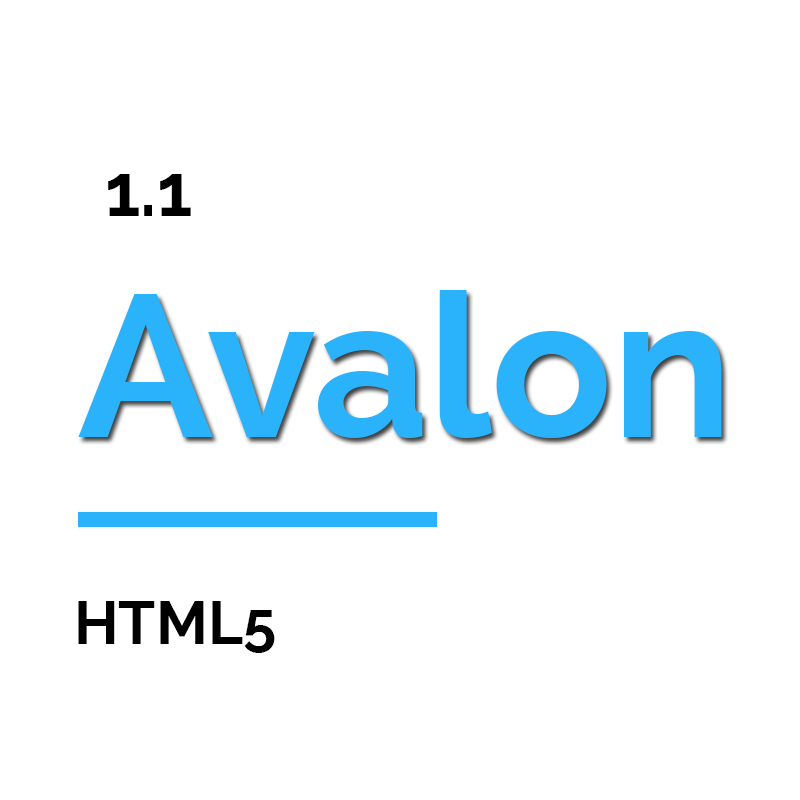
<style>
.page{position:relative;width:800px;height:800px;background:#ffffff}
.page>*{position:absolute;margin:0}
.t1{font:72px "Raleway-Bold";color:#000000}
.t2{font:200px "Raleway-Bold";color:#2ab3fb}
.t3{font:60px "Raleway-Bold";color:#000000}
</style>
<div class="page">
<p class="t1" style="left:108px;top:174px;width:83px;height:42px">1.1</p>
<p class="t2" style="left:78px;top:290px;width:644px;height:148px">Avalon</p>
<p class="t3" style="left:78px;top:601px;width:197px;height:52px">HTML5</p>
</div>
